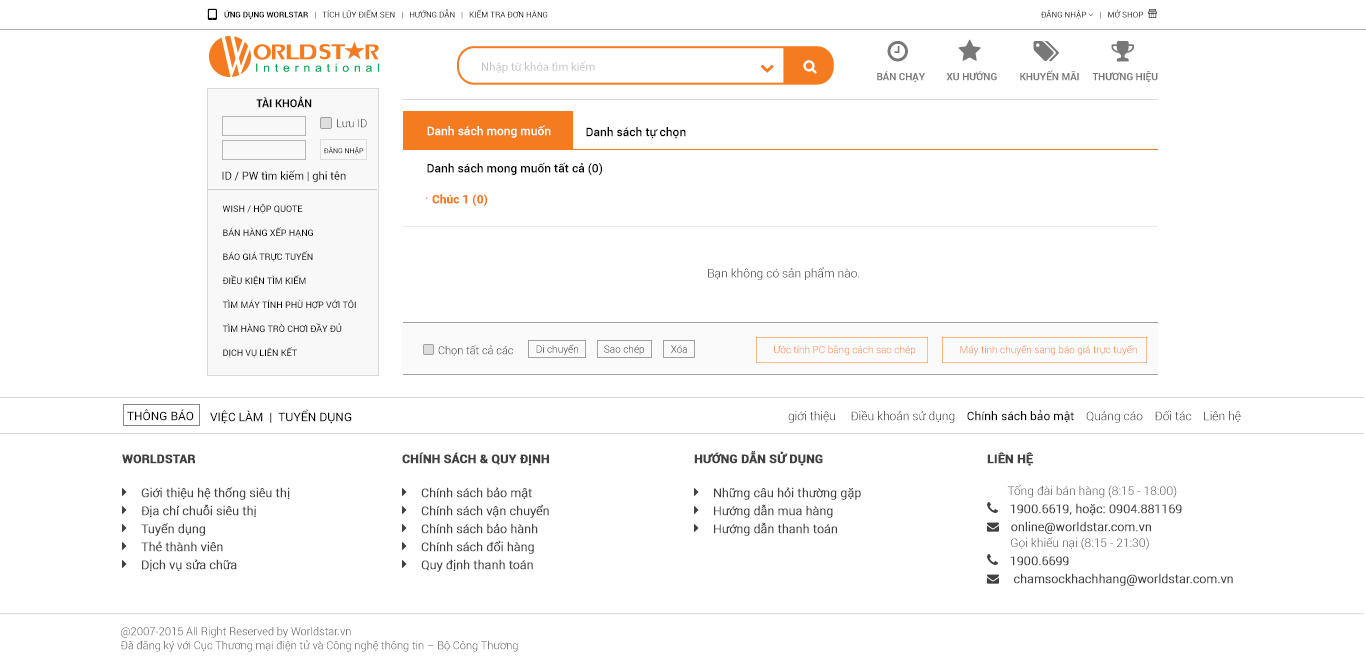
<style>
.page{position:relative;width:1366px;height:663px;background:#ffffff}
.page>*{position:absolute;margin:0}
.t1{font:8px "Roboto-Bold";color:#000000;text-transform:uppercase}
.t2{font:8px "Roboto-Regular";color:#000000;text-transform:uppercase}
.t3{font:12px "MyriadPro-Regular";color:#c3c3c3}
.t4{font:10px "Roboto-Bold";color:#787878;text-transform:uppercase}
.t5{font:11px "Roboto-Bold";color:#000000}
.t6{font:11px "Roboto-Light"}
.t7{font:12px "Roboto-Medium";color:#ffffff}
.t8{font:12px "Roboto-Medium";color:#000000}
.t9{font:7px "Roboto-Regular";color:#000000}
.t10{font:11px "Roboto-Regular";color:#000000}
.t11{font:12px "Roboto-Black";color:#f57b20}
.t12{font:14px "Roboto-Black";color:#f57b20}
.t13{font:9px/24px "Roboto-Regular";color:#000000;text-transform:uppercase}
.t14{font:12px "Roboto-Light"}
.t15{font:10px "Roboto-Light"}
.t16{font:12px "Roboto-Regular";color:#000000}
.t17{font:12px "Roboto-Light";color:#000000}
.t18{font:11px/14px "Roboto-Light";color:#414141}
</style>
<div class="page">
<p class="t1" style="left:224px;top:9px;width:324px;height:10px">ứng dụng Worlstar   |   <span class="t2">Tích lũy điểm sen</span>   |   <span class="t2">hướng dẫn</span>   |   <span class="t2">kiểm tra đơn hàng</span></p>
<p class="t3" style="left:482px;top:61px;width:113px;height:13px">Nhập từ khóa tìm kiếm</p>
<p class="t4" style="left:877px;top:71px;width:48px;height:11px">Bán chạy</p>
<p class="t4" style="left:946px;top:71px;width:51px;height:10px">xu hướng</p>
<p class="t4" style="left:1020px;top:70px;width:59px;height:11px">khuyến mãi</p>
<p class="t4" style="left:1092px;top:71px;width:66px;height:11px">thương hiệu</p>
<p class="t5" style="left:256px;top:96px;width:56px;height:12px">TÀI KHOẢN</p>
<p class="t6" style="left:337px;top:119px;width:30px;height:9px">Lưu ID</p>
<p class="t7" style="left:427px;top:125px;width:124px;height:13px">Danh sách mong muốn</p>
<p class="t8" style="left:586px;top:127px;width:100px;height:12px">Danh sách tự chọn</p>
<p class="t9" style="left:324px;top:146px;width:40px;height:9px">ĐĂNG NHẬP</p>
<p class="t10" style="left:222px;top:170px;width:124px;height:12px">ID / PW tìm kiếm | ghi tên</p>
<p class="t8" style="left:427px;top:162px;width:175px;height:14px">Danh sách mong muốn tất cả (0)</p>
<p class="t11" style="left:426px;top:194px;width:62px;height:12px"><span class="t12"> .  </span>Chúc 1 (0)</p>
<p class="t13" style="left:222px;top:203px;width:134px;height:155px">Wish / hộp quote<br>bán hàng xếp hạng<br>báo giá trực tuyến<br>điều kiện tìm kiếm <br>Tìm máy tính phù hợp với tôi<br>Tìm hàng trò chơi đầy đủ<br>Dịch vụ liên kết</p>
<p class="t14" style="left:708px;top:267px;width:151px;height:13px">Bạn không có sản phẩm nào.</p>
<p class="t6" style="left:438px;top:345px;width:75px;height:11px">Chọn tất cả các</p>
<p class="t15" style="left:536px;top:344px;width:42px;height:11px">Di chuyển</p>
<p class="t15" style="left:604px;top:345px;width:40px;height:10px">Sao chép</p>
<p class="t15" style="left:671px;top:345px;width:16px;height:8px">Xóa</p>
<p class="t15" style="left:774px;top:344px;width:363px;height:12px">Ước tính PC bằng cách sao chép                  Máy tính chuyển sang báo giá trực tuyến</p>
<p class="t16" style="left:127px;top:409px;width:67px;height:12px">THÔNG BÁO</p>
<p class="t16" style="left:210px;top:409px;width:142px;height:15px">VIỆC LÀM  |  TUYỂN DỤNG</p>
<p class="t17" style="left:788px;top:410px;width:453px;height:13px">giới thiệu     Điều khoản sử dụng    <span class="t16">Chính sách bảo mật</span>    Quảng cáo    Đối tác    Liên hệ</p>
<p class="t18" style="left:120px;top:626px;width:398px;height:26px">@2007-2015 All Right Reserved by Worldstar.vn <br>Đã đăng ký với Cục Thương mại điện tử và Công nghệ thông tin – Bộ Công Thương</p>
</div>
